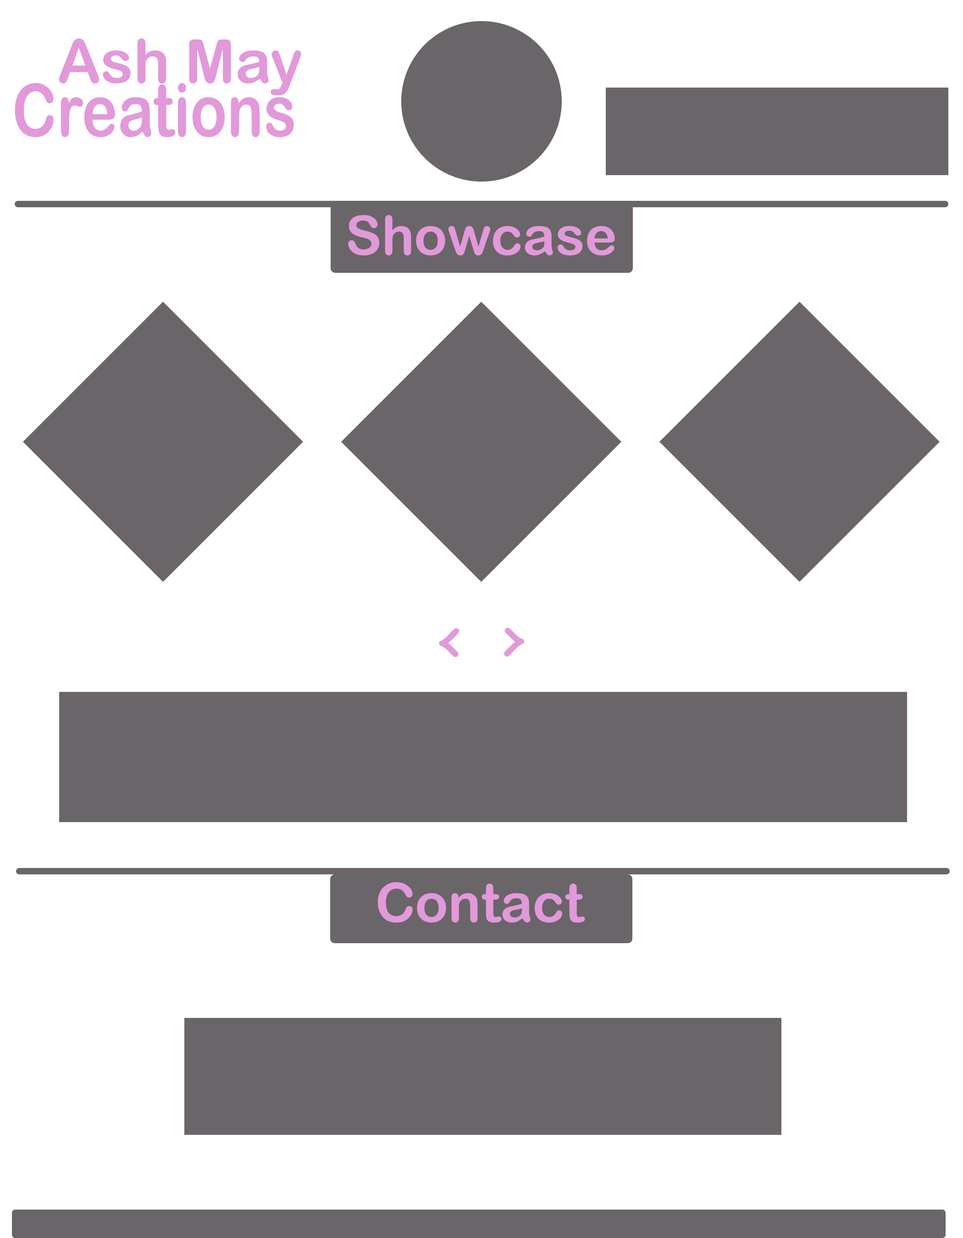
<style>
.page{position:relative;width:963px;height:1238px;background:#ffffff}
.page>*{position:absolute;margin:0}
.t1{font:60.4px "ArialRoundedMTBold";color:#e299d9}
.t2{font:73.2px "ArialRoundedMTBold";color:#e299d9;scale:0.83 1}
.t3{font:54.4px "ArialRoundedMTBold";color:#e299d9}
.t4{font:68.1px "ComicSansMS";color:#e299d9}
</style>
<div class="page">
<p class="t1" style="left:59px;top:39px;width:242px;height:56px">Ash May</p>
<p class="t2" style="left:15px;top:83px;width:279px;height:54px">Creations</p>
<p class="t3" style="left:348px;top:215px;width:267px;height:40px">Showcase</p>
<p class="t4" style="left:439px;top:628px;width:21px;height:29px">&lt;</p>
<p class="t4" style="left:504px;top:628px;width:21px;height:29px;rotate:180deg">&lt;</p>
<p class="t3" style="left:377px;top:882px;width:208px;height:41px">Contact</p>
</div>
